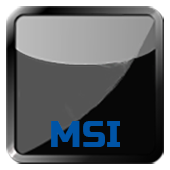
<style>
.page{position:relative;width:170px;height:170px}
.page>*{position:absolute;margin:0}
.t1{font:36px "RussoOne";color:#0054a6}
</style>
<div class="page">
<p class="t1" style="left:51px;top:121px;width:69px;height:26px">MSI</p>
</div>
